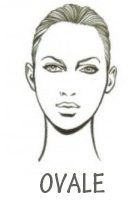
<style>
.page{position:relative;width:140px;height:200px;background:#ffffff}
.page>*{position:absolute;margin:0}
.t1{font:30px "TektonPro-BoldCond";color:#606159}
</style>
<div class="page">
<p class="t1" style="left:40px;top:173px;width:65px;height:20px">OVALE</p>
</div>
